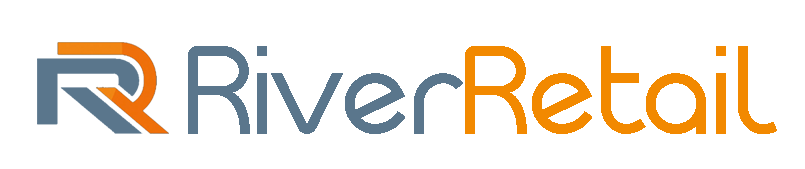
<style>
.page{position:relative;width:805px;height:169px;background:#ffffff}
.page>*{position:absolute;margin:0}
.t1{font:125px "MeltixRegularDemo";letter-spacing:-0.05em;color:#f28900}
.t2{font:125px "MeltixRegularDemo";letter-spacing:-0.05em;color:#5a768c}
</style>
<div class="page">
<p class="t1" style="left:188px;top:46px;width:589px;height:88px"><span class="t2">River</span>Retail</p>
</div>
